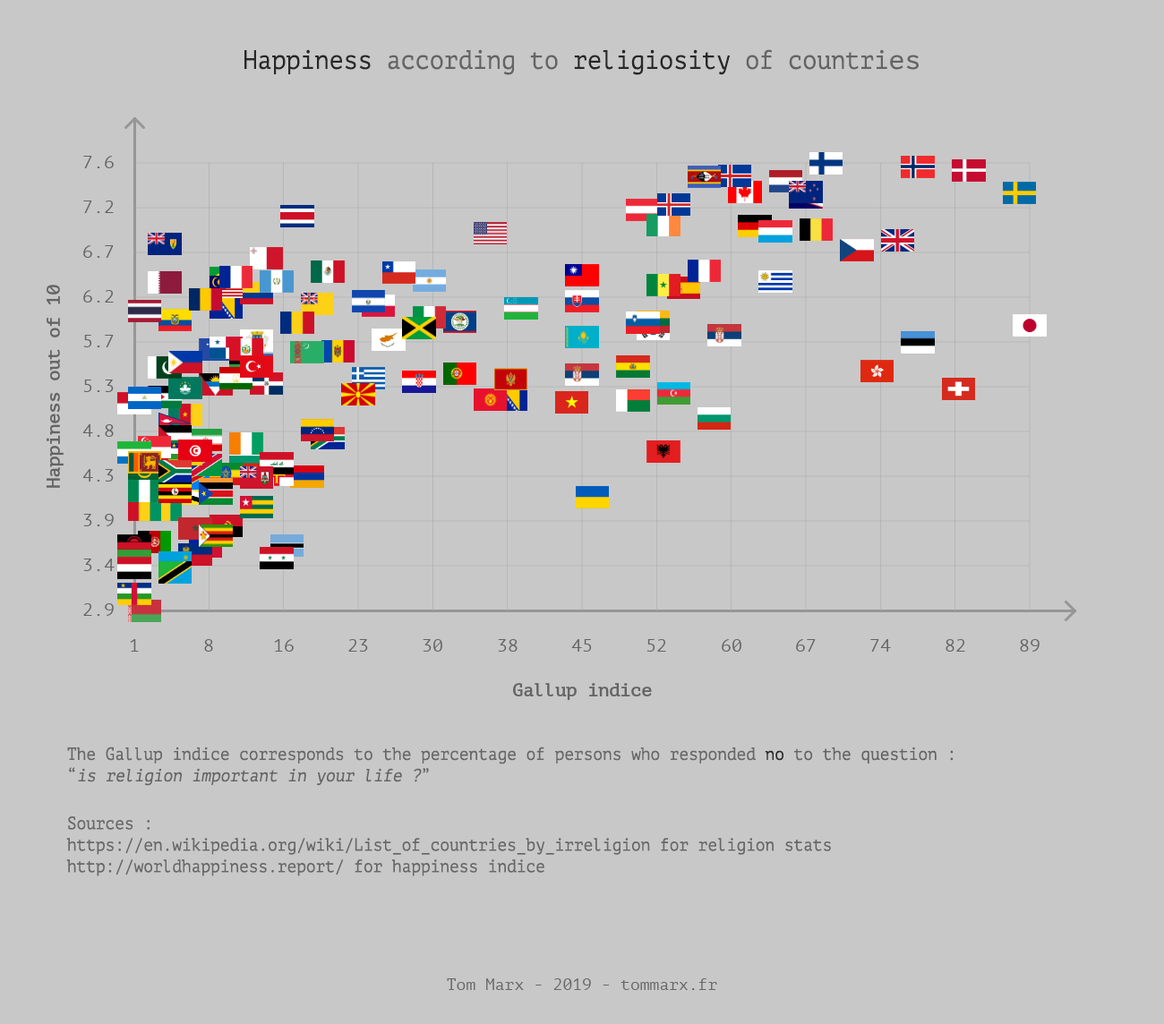
<style>
.page{position:relative;width:1164px;height:1024px;background:#c8c8c8}
.page>*{position:absolute;margin:0}
.t1{font:26.9px "PTMono-Regular";color:#646464;scale:0.89 1}
.t2{font:26.9px "PTMono-Regular";color:#282828;scale:0.89 1}
.t3{font:26.9px "PTMono-Regular";color:#646464}
.t4{font:17.9px "PTMono-Regular";color:#676767;scale:0.89 1}
.t5{font:17.9px "PTMono-Regular";color:#292929;scale:0.89 1}
.t6{font:17.9px "PTMono-Regular";color:#646464;scale:0.89 1}
.t7{font:17.9px "PTMono-Regular";color:#646464;font-style:italic;scale:0.89 1}
.t8{font:16.1px "PTMono-Regular";color:#676767}
</style>
<div class="page">
<p class="t1" style="left:244px;top:49px;width:675px;height:26px"><span class="t2">Happiness </span>according to <span class="t2">religiosity </span>of countri<span class="t3">es</span></p>
<p class="t4" style="left:67px;top:747px;width:887px;height:39px">The Gallup indice corresponds to the percentage of persons who responded <span class="t5">no</span><span class="t6"> to the question :<br>“</span><span class="t7">is religion important in your life ?</span><span class="t6">”</span></p>
<p class="t4" style="left:66px;top:817px;width:765px;height:60px">Sources :<br>https://en.wikipedia.org/wiki/List_of_countries_by_irreligion for religion stats<br>http://worldhappiness.report/ for happiness indice</p>
<p class="t8" style="left:447px;top:979px;width:270px;height:11px">Tom Marx - 2019 - tommarx.fr</p>
</div>
